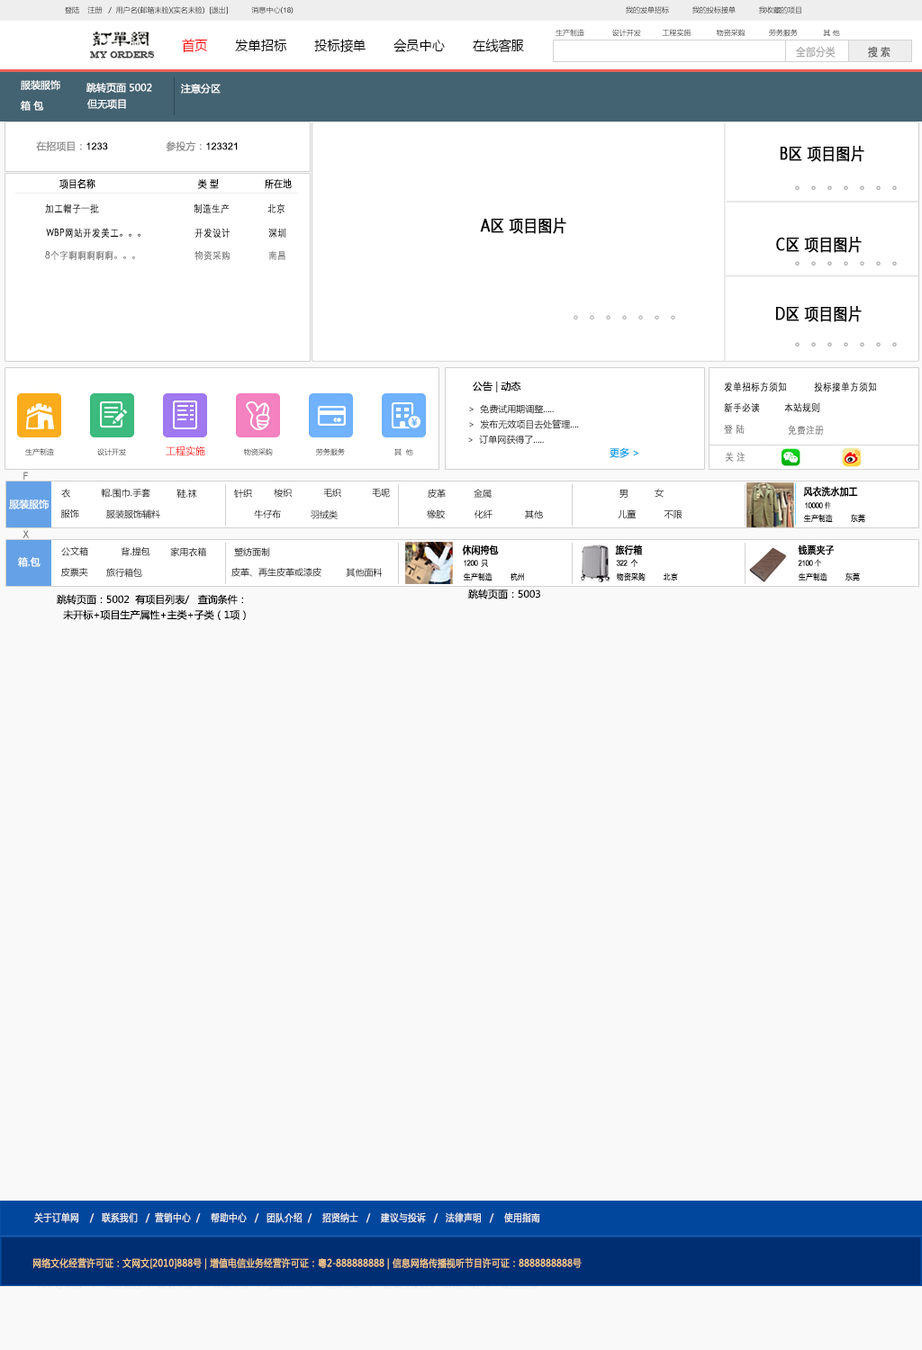
<style>
.page{position:relative;width:922px;height:1350px;background:#f9f9f9}
.page>*{position:absolute;margin:0}
.t1{font:7.2px "MicrosoftYaHei"}
.t2{font:7.2px "ArialMT"}
.t3{font:13.9px "MicrosoftYaHei";color:#000000;font-variant:small-caps;scale:0.94 1}
.t4{font:13.9px "MicrosoftYaHei";color:#ff0000;font-variant:small-caps;scale:0.94 1}
.t5{font:8.9px "EngraversMT";color:#434343;font-variant:small-caps;font-weight:bold;scale:0.86 1}
.t6{font:10.9px "MicrosoftYaHei";color:#aaaaaa;font-variant:small-caps;font-weight:bold;scale:0.86 1}
.t7{font:10.9px "MicrosoftYaHei";color:#626262;font-variant:small-caps;font-weight:bold;scale:0.86 1}
.t8{font:9.9px "MicrosoftYaHei";color:#ffffff}
.t9{font:9.9px "MicrosoftYaHei";color:#898989}
.t10{font:9.9px "ArialMT";color:#000000}
.t11{font:15.8px "MicrosoftYaHei";color:#000000;font-variant:small-caps;font-weight:bold;scale:0.86 1}
.t12{font:9.9px "MicrosoftYaHei";color:#000000;font-variant:small-caps;font-weight:bold;scale:0.86 1}
.t13{font:16.2px "MicrosoftYaHei";color:#aaaaaa}
.t14{font:9.9px "STXihei";color:#000000;font-variant:small-caps;font-weight:bold;scale:0.86 1}
.t15{font:9.9px "STXihei";color:#767676;font-variant:small-caps;font-weight:bold;scale:0.86 1}
.t16{font:16.2px "MicrosoftYaHei";color:#b5b5b5}
.t17{font:9.9px "MicrosoftYaHei";color:#000000}
.t18{font:9px "MicrosoftYaHei"}
.t19{font:9px "MicrosoftYaHei";color:#000000}
.t20{font:9.9px "MicrosoftYaHei";color:#ff0000}
.t21{font:9.9px "MicrosoftYaHei";color:#00a0e9}
.t22{font:5.9px "STXihei";color:#bebebe;font-variant:small-caps;font-weight:bold;scale:0.86 1}
.t23{font:9.9px "ArialMT";color:#767676;font-variant:small-caps;font-weight:bold;scale:0.86 1}
.t24{font:7.9px "ArialMT";color:#000000;font-variant:small-caps;font-weight:bold;scale:0.86 1}
.t25{font:7.9px "SimSun";color:#000000;font-variant:small-caps;font-weight:bold;scale:0.86 1}
.t26{font:7.9px "MicrosoftYaHei";color:#000000;font-variant:small-caps;font-weight:bold;scale:0.86 1}
.t27{font:9.9px "MicrosoftYaHei";color:#eeeeee;font-variant:small-caps;font-weight:bold;scale:0.86 1}
.t28{font:13.9px "STXihei";color:#eeeeee;font-variant:small-caps;font-weight:bold;scale:0.86 1}
.t29{font:9.9px "MicrosoftYaHei";color:#facd89;font-variant:small-caps;font-weight:bold;scale:0.87 1}
.t30{font:9.9px "MicrosoftYaHei";color:#eeeeee;font-variant:small-caps;font-weight:bold;scale:0.87 1}
</style>
<div class="page">
<p class="t1" style="left:65px;top:6px;width:228px;height:8px">登陆    注册   /  用户名(邮箱未验)(实名未验)  [退出]           消息中心(<span class="t2">18</span>)</p>
<p class="t1" style="left:626px;top:6px;width:175px;height:8px">我的发单招标           我的投标接单           我收藏的项目</p>
<p class="t1" style="left:555px;top:29px;width:285px;height:8px">生产制造             设计开发          工程实施            物资采购           劳务服务            其 他</p>
<p class="t3" style="left:182px;top:39px;width:342px;height:14px"><span class="t4">首页       </span>发单招标       投标接单       会员中心       在线客服</p>
<p class="t5" style="left:90px;top:51px;width:65px;height:7px">MY ORDERS</p>
<p class="t6" style="left:796px;top:46px;width:39px;height:12px">全部分类</p>
<p class="t7" style="left:868px;top:46px;width:22px;height:12px">搜 索</p>
<p class="t8" style="left:21px;top:80px;width:39px;height:10px">服装服饰</p>
<p class="t8" style="left:86px;top:83px;width:66px;height:10px">跳转页面 5002</p>
<p class="t8" style="left:181px;top:84px;width:39px;height:10px">注意分区</p>
<p class="t8" style="left:21px;top:101px;width:23px;height:10px">箱 包</p>
<p class="t8" style="left:87px;top:99px;width:39px;height:10px">但无项目</p>
<p class="t9" style="left:36px;top:141px;width:72px;height:10px">在招项目：<span class="t10">1233</span></p>
<p class="t10" style="left:166px;top:141px;width:72px;height:10px"><span class="t9">参投方：</span>123321</p>
<p class="t11" style="left:779px;top:146px;width:85px;height:16px">B区 项目图片</p>
<p class="t12" style="left:59px;top:178px;width:233px;height:11px">项目名称                                      类 型                 所在地</p>
<p class="t13" style="left:795px;top:185px;width:101px;height:5px">。。。。。。。</p>
<p class="t14" style="left:45px;top:203px;width:240px;height:10px">加工帽子一批                                   制造生产              北京</p>
<p class="t11" style="left:480px;top:218px;width:86px;height:16px">A区 项目图片</p>
<p class="t14" style="left:46px;top:228px;width:239px;height:10px">WBP网站开发美工。。。                  开发设计              深圳</p>
<p class="t11" style="left:776px;top:237px;width:85px;height:16px">C区 项目图片</p>
<p class="t15" style="left:45px;top:250px;width:240px;height:10px">8个字啊啊啊啊啊。。。                    物资采购              南昌</p>
<p class="t13" style="left:795px;top:261px;width:101px;height:5px">。。。。。。。</p>
<p class="t16" style="left:573px;top:315px;width:102px;height:5px">。。。。。。。</p>
<p class="t11" style="left:775px;top:306px;width:86px;height:16px">D区 项目图片</p>
<p class="t13" style="left:795px;top:342px;width:101px;height:4px">。。。。。。。</p>
<p class="t17" style="left:472px;top:381px;width:49px;height:11px">公告 | 动态</p>
<p class="t14" style="left:724px;top:382px;width:152px;height:10px">发单招标方须知          投标接单方须知</p>
<p class="t18" style="left:469px;top:404px;width:85px;height:10px">&gt;  免费试用期调整.....</p>
<p class="t14" style="left:724px;top:402px;width:95px;height:10px">新手必读         本站规则</p>
<p class="t19" style="left:469px;top:419px;width:110px;height:10px">&gt;  发布无效项目去处管理....</p>
<p class="t15" style="left:724px;top:424px;width:20px;height:10px">登 陆</p>
<p class="t15" style="left:788px;top:425px;width:36px;height:10px">免费注册</p>
<p class="t18" style="left:468px;top:435px;width:76px;height:10px">&gt;  订单网获得了.....</p>
<p class="t1" style="left:25px;top:448px;width:29px;height:7px">生产制造</p>
<p class="t1" style="left:97px;top:448px;width:29px;height:7px">设计开发</p>
<p class="t20" style="left:166px;top:446px;width:39px;height:10px">工程实施</p>
<p class="t1" style="left:244px;top:448px;width:29px;height:7px">物资采购</p>
<p class="t1" style="left:316px;top:448px;width:29px;height:7px">劳务服务</p>
<p class="t1" style="left:394px;top:448px;width:19px;height:7px">其  他</p>
<p class="t21" style="left:609px;top:447px;width:29px;height:11px">更多 &gt;</p>
<p class="t22" style="left:709px;top:445px;width:209px;height:1px">--------------------------------------------------------------------------------------------------------------------</p>
<p class="t15" style="left:725px;top:452px;width:20px;height:10px">关 注</p>
<p class="t23" style="left:23px;top:472px;width:5px;height:8px">F</p>
<p class="t12" style="left:803px;top:486px;width:55px;height:11px">风衣洗水加工</p>
<p class="t18" style="left:61px;top:489px;width:9px;height:9px">衣</p>
<p class="t19" style="left:101px;top:488px;width:49px;height:10px">帽.围巾.手套</p>
<p class="t19" style="left:176px;top:489px;width:21px;height:10px">鞋.袜</p>
<p class="t18" style="left:234px;top:489px;width:18px;height:9px">针织</p>
<p class="t18" style="left:274px;top:488px;width:18px;height:10px">梭织</p>
<p class="t18" style="left:323px;top:488px;width:18px;height:9px">毛织</p>
<p class="t18" style="left:372px;top:488px;width:18px;height:10px">毛呢</p>
<p class="t18" style="left:428px;top:489px;width:18px;height:10px">皮革</p>
<p class="t18" style="left:473px;top:489px;width:18px;height:9px">金属</p>
<p class="t18" style="left:619px;top:490px;width:8px;height:8px">男</p>
<p class="t18" style="left:654px;top:488px;width:10px;height:10px">女</p>
<p class="t8" style="left:9px;top:499px;width:40px;height:10px">服装服饰</p>
<p class="t18" style="left:60px;top:509px;width:19px;height:9px">服饰</p>
<p class="t18" style="left:106px;top:509px;width:54px;height:10px">服装服饰辅料</p>
<p class="t18" style="left:254px;top:509px;width:27px;height:9px">牛仔布</p>
<p class="t18" style="left:427px;top:509px;width:18px;height:9px">橡胶</p>
<p class="t19" style="left:474px;top:509px;width:18px;height:10px">化纤</p>
<p class="t18" style="left:525px;top:509px;width:18px;height:10px">其他</p>
<p class="t18" style="left:617px;top:509px;width:19px;height:9px">儿童</p>
<p class="t24" style="left:805px;top:501px;width:26px;height:8px">10000 <span class="t25">件</span></p>
<p class="t18" style="left:310px;top:510px;width:28px;height:9px">羽绒类</p>
<p class="t18" style="left:663px;top:510px;width:19px;height:9px">不限</p>
<p class="t26" style="left:804px;top:514px;width:61px;height:9px">生产制造          东莞</p>
<p class="t23" style="left:22px;top:530px;width:7px;height:8px">X</p>
<p class="t12" style="left:462px;top:544px;width:37px;height:11px">休闲挎包</p>
<p class="t12" style="left:615px;top:544px;width:28px;height:11px">旅行箱</p>
<p class="t12" style="left:797px;top:544px;width:37px;height:11px">钱票夹子</p>
<p class="t8" style="left:18px;top:557px;width:22px;height:10px">箱.包</p>
<p class="t18" style="left:61px;top:546px;width:27px;height:10px">公文箱</p>
<p class="t18" style="left:121px;top:546px;width:29px;height:10px">背.提包</p>
<p class="t19" style="left:170px;top:547px;width:36px;height:10px">家用衣箱</p>
<p class="t19" style="left:234px;top:547px;width:36px;height:9px">塑纺面制</p>
<p class="t19" style="left:61px;top:567px;width:27px;height:10px">皮票夹</p>
<p class="t19" style="left:106px;top:568px;width:36px;height:9px">旅行箱包</p>
<p class="t18" style="left:231px;top:567px;width:90px;height:10px">皮革、再生皮革或漆皮</p>
<p class="t19" style="left:346px;top:568px;width:36px;height:9px">其他面料</p>
<p class="t24" style="left:464px;top:559px;width:24px;height:8px">1200  <span class="t26">只</span></p>
<p class="t24" style="left:616px;top:559px;width:22px;height:8px">322  <span class="t26">个</span></p>
<p class="t24" style="left:797px;top:559px;width:24px;height:8px">2100 <span class="t25">个</span></p>
<p class="t26" style="left:464px;top:572px;width:60px;height:9px">生产制造          杭州</p>
<p class="t26" style="left:616px;top:572px;width:62px;height:9px">物资采购          北京</p>
<p class="t26" style="left:798px;top:572px;width:62px;height:9px">生产制造          东莞</p>
<p class="t17" style="left:468px;top:589px;width:72px;height:10px">跳转页面：5003</p>
<p class="t17" style="left:57px;top:594px;width:186px;height:11px">跳转页面：5002  有项目列表/   查询条件：</p>
<p class="t17" style="left:63px;top:609px;width:183px;height:11px">未开标+项目生产属性+主类+子类（1项）</p>
<p class="t27" style="left:34px;top:1212px;width:506px;height:11px"><span class="t28"><br><br></span>关于订单网    /   联系我们   /  营销中心  /    帮助中心   /   团队介绍  /    招贤纳士   /    建议与投诉   /   法律声明   /    使用指南</p>
<p class="t29" style="left:33px;top:1257px;width:548px;height:13px"><span class="t30"> </span>网络文化经营许可证：文网文[2010]888号 | 增值电信业务经营许可证：粤2-888888888 | 信息网络传播视听节目许可证：8888888888号</p>
</div>
